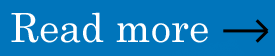
<style>
.page{position:relative;width:275px;height:56px;background:#0075bb}
.page>*{position:absolute;margin:0}
.t1{font:40px "CenturySchoolbook";color:#ffffff}
</style>
<div class="page">
<p class="t1" style="left:11px;top:12px;width:197px;height:31px">Read more</p>
</div>
